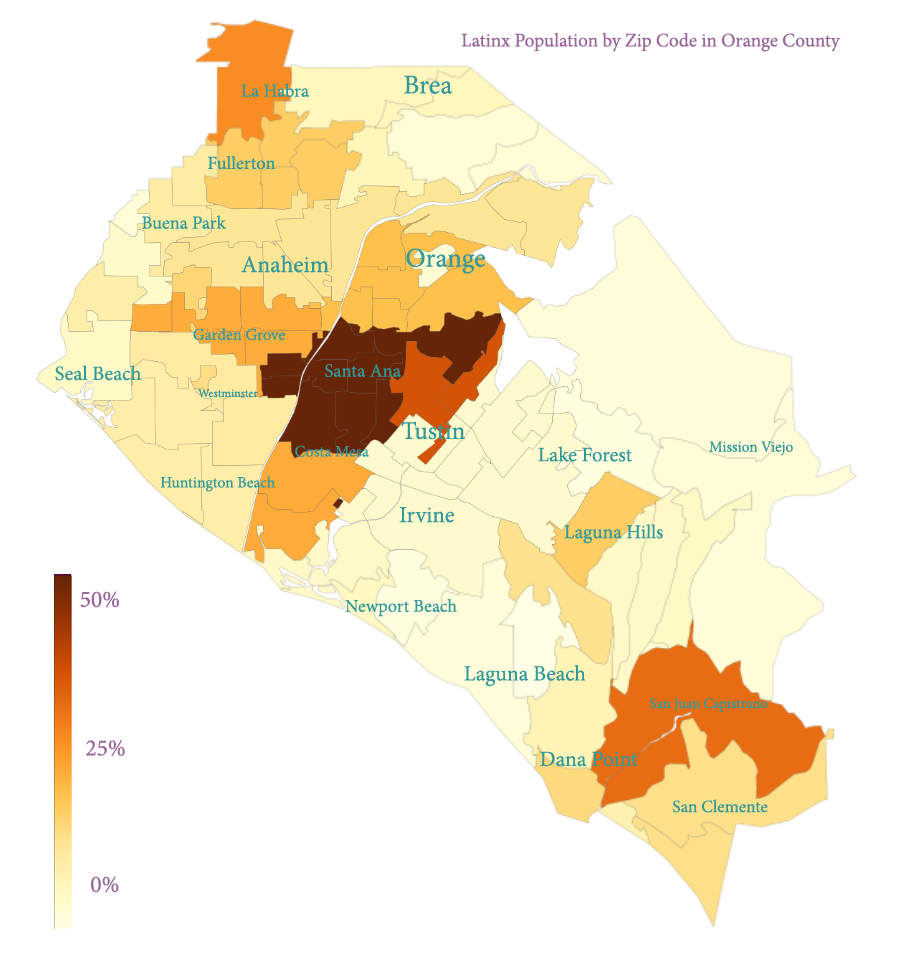
<style>
.page{position:relative;width:909px;height:953px;background:#ffffff}
.page>*{position:absolute;margin:0}
.t1{font:19.1px "MinionPro-Regular";color:#996699}
.t2{font:27.1px "MinionPro-Regular";color:#339999}
.t3{font:18.4px "MinionPro-Regular";color:#339999}
.t4{font:23.7px "MinionPro-Regular";color:#339999}
.t5{font:27px "MinionPro-Regular";color:#339999}
.t6{font:16.3px "MinionPro-Regular";color:#339999}
.t7{font:20.3px "MinionPro-Regular";color:#339999}
.t8{font:18.8px "MinionPro-Regular";color:#339999}
.t9{font:11.8px "MinionPro-Regular";color:#339999}
.t10{font:25.4px "MinionPro-Regular";color:#339999}
.t11{font:16.1px "MinionPro-Regular";color:#339999}
.t12{font:20.5px "MinionPro-Regular";color:#339999}
.t13{font:15.2px "MinionPro-Regular";color:#339999}
.t14{font:15.6px "MinionPro-Regular";color:#339999}
.t15{font:22.8px "MinionPro-Regular";color:#339999}
.t16{font:19.5px "MinionPro-Regular";color:#339999}
.t17{font:23.5px "MinionPro-Regular";color:#996699}
.t18{font:18px "MinionPro-Regular";color:#339999}
.t19{font:21.7px "MinionPro-Regular";color:#339999}
.t20{font:14.6px "MinionPro-Regular";color:#339999}
.t21{font:21.8px "MinionPro-Regular";color:#339999}
.t22{font:17.3px "MinionPro-Regular";color:#339999}
</style>
<div class="page">
<p class="t1" style="left:461px;top:32px;width:380px;height:20px">Latinx Population by Zip Code in Orange County</p>
<p class="t2" style="left:404px;top:75px;width:49px;height:19px">Brea</p>
<p class="t3" style="left:241px;top:83px;width:68px;height:14px">La Habra</p>
<p class="t3" style="left:208px;top:155px;width:68px;height:15px">Fullerton</p>
<p class="t3" style="left:142px;top:215px;width:85px;height:14px">Buena Park</p>
<p class="t4" style="left:241px;top:255px;width:88px;height:18px">Anaheim</p>
<p class="t5" style="left:406px;top:248px;width:79px;height:26px">Orange</p>
<p class="t6" style="left:193px;top:328px;width:92px;height:13px">Garden Grove</p>
<p class="t7" style="left:55px;top:365px;width:87px;height:16px">Seal Beach</p>
<p class="t8" style="left:325px;top:364px;width:76px;height:13px">Santa Ana</p>
<p class="t9" style="left:198px;top:389px;width:60px;height:9px">Westminster</p>
<p class="t10" style="left:401px;top:421px;width:64px;height:19px">Tustin</p>
<p class="t11" style="left:295px;top:445px;width:74px;height:12px">Costa Mesa</p>
<p class="t12" style="left:538px;top:446px;width:94px;height:16px">Lake Forest</p>
<p class="t13" style="left:709px;top:441px;width:84px;height:15px">Mission Viejo</p>
<p class="t14" style="left:160px;top:476px;width:115px;height:16px">Huntington Beach</p>
<p class="t15" style="left:399px;top:507px;width:55px;height:16px">Irvine</p>
<p class="t16" style="left:564px;top:524px;width:99px;height:20px">Laguna Hills</p>
<p class="t17" style="left:80px;top:591px;width:39px;height:17px">50%</p>
<p class="t18" style="left:345px;top:598px;width:112px;height:19px">Newport Beach</p>
<p class="t19" style="left:464px;top:664px;width:122px;height:23px">Laguna Beach</p>
<p class="t20" style="left:650px;top:698px;width:118px;height:14px">San Juan Capistrano</p>
<p class="t17" style="left:86px;top:740px;width:39px;height:17px">25%</p>
<p class="t21" style="left:540px;top:751px;width:98px;height:16px">Dana Point</p>
<p class="t22" style="left:673px;top:799px;width:95px;height:14px">San Clemente</p>
<p class="t17" style="left:91px;top:876px;width:28px;height:17px">0%</p>
</div>
